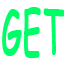
<style>
.page{position:relative;width:64px;height:64px;background:#ffffff}
.page>*{position:absolute;margin:0}
.t1{font:60px "ComicSansMS";color:#00ff66;text-transform:uppercase;font-weight:bold;scale:0.5 1}
</style>
<div class="page">
<p class="t1" style="left:2px;top:7px;width:62px;height:51px">get</p>
</div>
